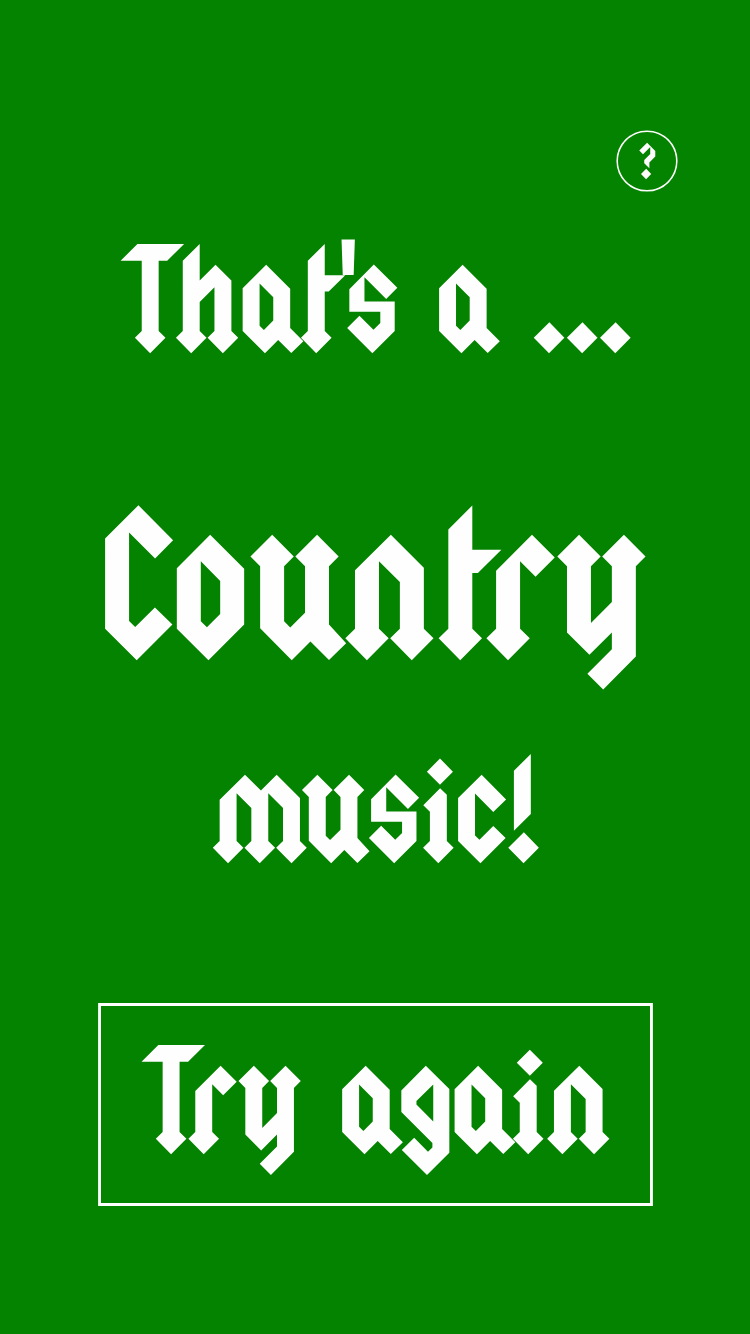
<style>
.page{position:relative;width:750px;height:1334px;background:#048300}
.page>*{position:absolute;margin:0}
.t1{font:40px "Squealer";color:#fffefe}
.t2{font:120px "Squealer";color:#fffefe}
.t3{font:170px "Squealer";color:#fffefe}
</style>
<div class="page">
<p class="t1" style="left:639px;top:142px;width:17px;height:38px">?</p>
<p class="t2" style="left:120px;top:239px;width:511px;height:115px">That's a ...</p>
<p class="t3" style="left:105px;top:505px;width:541px;height:185px">Country</p>
<p class="t2" style="left:212px;top:753px;width:327px;height:111px">music!</p>
<p class="t2" style="left:141px;top:1044px;width:469px;height:132px">Try again</p>
</div>
